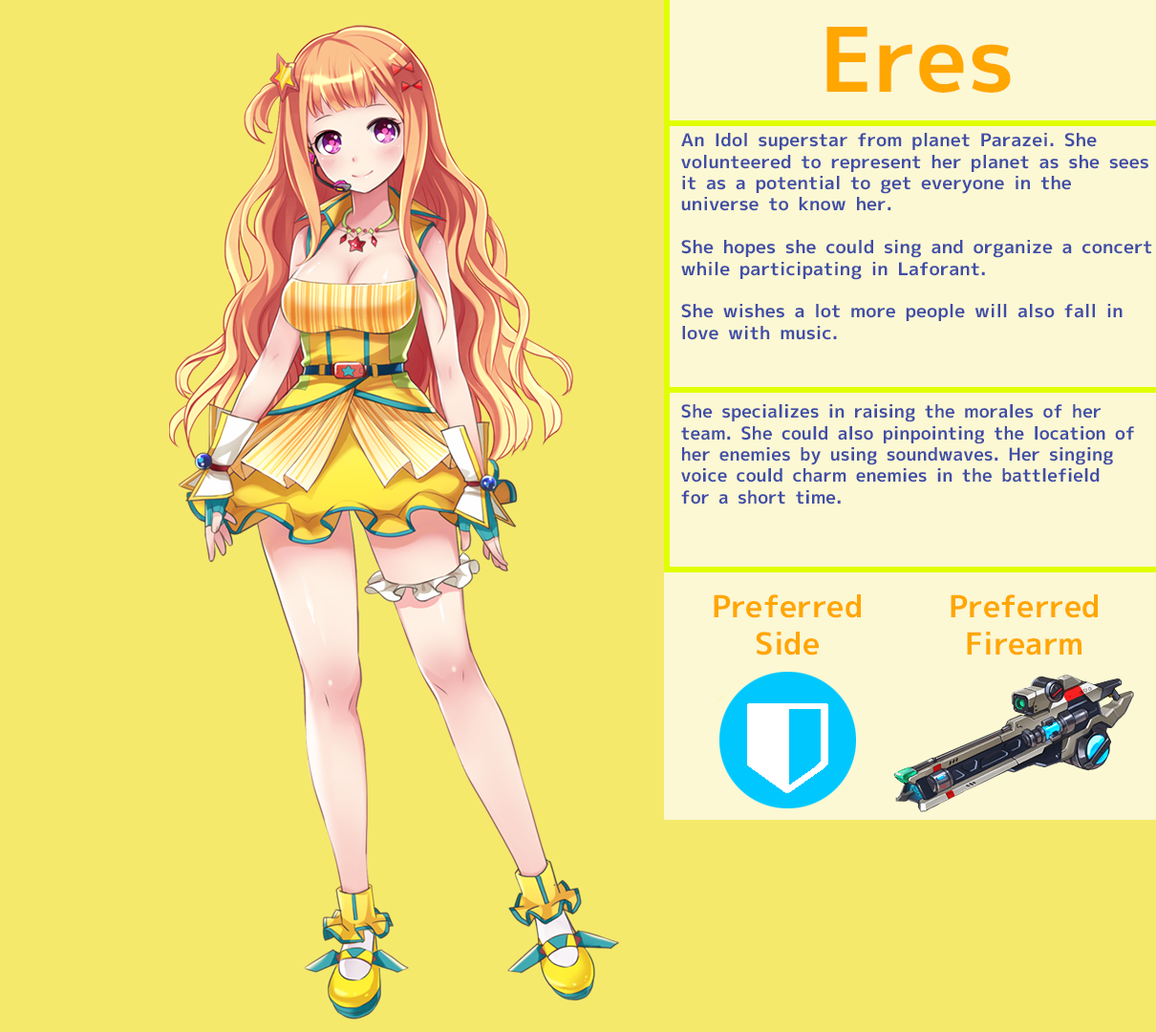
<style>
.page{position:relative;width:1156px;height:1032px;background:#f5e96c}
.page>*{position:absolute;margin:0}
.t1{font:89.2px "MigMix-2P-Bold";color:#ffa600}
.t2{font:17.8px "MigMix-2P-Bold";color:#404ea7;scale:1.03 1}
.t3{font:17.8px "MigMix-2P-Bold";color:#404ea7}
.t4{font:30.6px "MigMix-2P-Bold";color:#ffa600}
</style>
<div class="page">
<p class="t1" style="left:826px;top:27px;width:185px;height:66px">Eres</p>
<p class="t2" style="left:681px;top:133px;width:471px;height:207px">An Idol superstar from planet Parazei. She volunteered to represent her planet as she sees it as a potential to get everyone in the universe to know her.<br><br>She hopes she could sing and organize a concert while participating in Laforant. <br><br>She wishes a lot more people will also fall in love with music.</p>
<p class="t3" style="left:681px;top:404px;width:453px;height:100px">She specializes in raising the morales of her team. She could also pinpointing the location of her enemies by using soundwaves. Her singing voice could charm enemies in the battlefield for a short time.</p>
<p class="t4" style="left:714px;top:594px;width:147px;height:61px;text-align:center">Preferred<br>Side</p>
<p class="t4" style="left:950px;top:594px;width:148px;height:61px;text-align:center">Preferred<br>Firearm</p>
</div>
